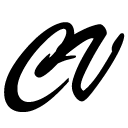
<style>
.page{position:relative;width:128px;height:128px;background:#ffffff}
.page>*{position:absolute;margin:0}
.t1{font:111.9px "BrushScriptMT";color:#000000}
</style>
<div class="page">
<p class="t1" style="left:4px;top:22px;width:121px;height:90px">CV</p>
</div>
